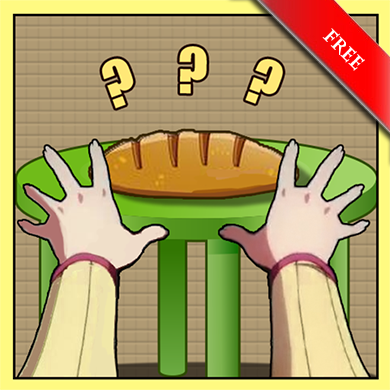
<style>
.page{position:relative;width:390px;height:390px}
.page>*{position:absolute;margin:0}
.t1{font:18px "CharlemagneStd-Bold";color:#ffffff}
</style>
<div class="page">
<p class="t1" style="left:322px;top:28px;width:43px;height:43px;rotate:45deg">free</p>
</div>
